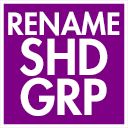
<style>
.page{position:relative;width:128px;height:128px;background:#7e0084}
.page>*{position:absolute;margin:0}
.t1{font:48px/40px "FuturaLT-Heavy";color:#ffffff}
.t2{font:30px/30px "FuturaLT-Heavy";color:#ffffff}
</style>
<div class="page">
<p class="t1" style="left:8px;top:11px;width:112px;height:105px;text-align:center"><span class="t2">RENAME<br></span>SHD<br>GRP</p>
</div>
